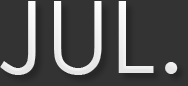
<style>
.page{position:relative;width:188px;height:86px;background:#333333}
.page>*{position:absolute;margin:0}
.t1{font:100px "CenturyGothic";color:#ffffff}
</style>
<div class="page">
<p class="t1" style="left:0px;top:1px;width:178px;height:74px">JUL.</p>
</div>
